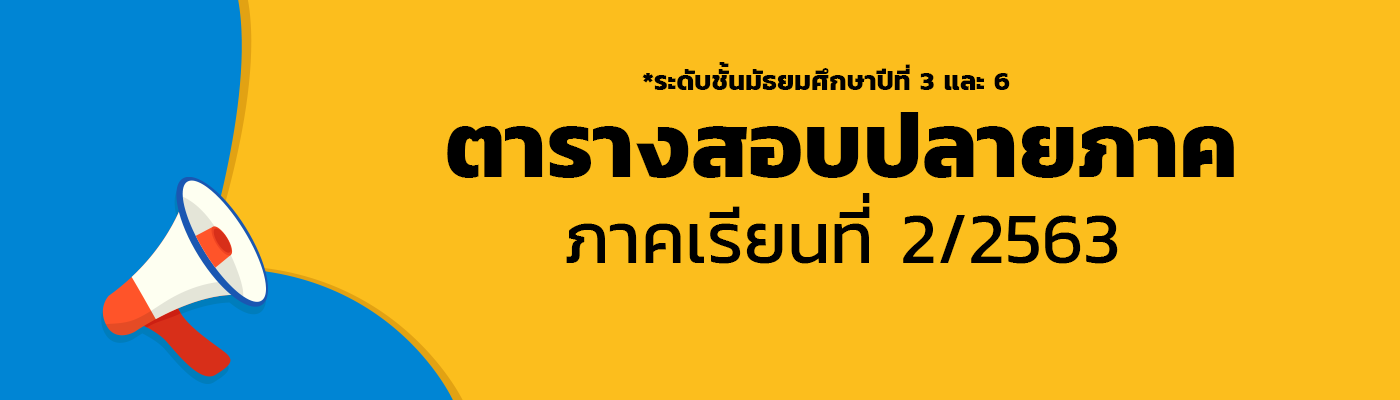
<style>
.page{position:relative;width:1400px;height:400px;background:#fcbe1d}
.page>*{position:absolute;margin:0}
.t1{font:27px "Kanit-Bold";color:#000000}
.t2{font:72px "Kanit-Regular";color:#000000}
.t3{font:92px "Kanit-Bold";color:#000000}
</style>
<div class="page">
<p class="t1" style="left:642px;top:62px;width:368px;height:28px">*ระดับชั้นมัธยมศึกษาปีที่ 3 และ 6</p>
<p class="t2" style="left:447px;top:112px;width:787px;height:152px;text-align:center"><span class="t3">ตารางสอบปลายภาค<br></span>ภาคเรียนที่ 2/2563</p>
</div>
